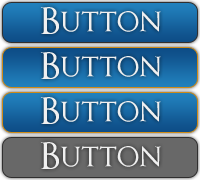
<style>
.page{position:relative;width:200px;height:180px}
.page>*{position:absolute;margin:0}
.t1{font:36px "OptimusPrinceps";color:#f0f0f0}
</style>
<div class="page">
<p class="t1" style="left:40px;top:7px;width:121px;height:27px">Button</p>
<p class="t1" style="left:40px;top:52px;width:121px;height:27px">Button</p>
<p class="t1" style="left:40px;top:97px;width:121px;height:27px">Button</p>
<p class="t1" style="left:40px;top:142px;width:121px;height:27px">Button</p>
</div>
